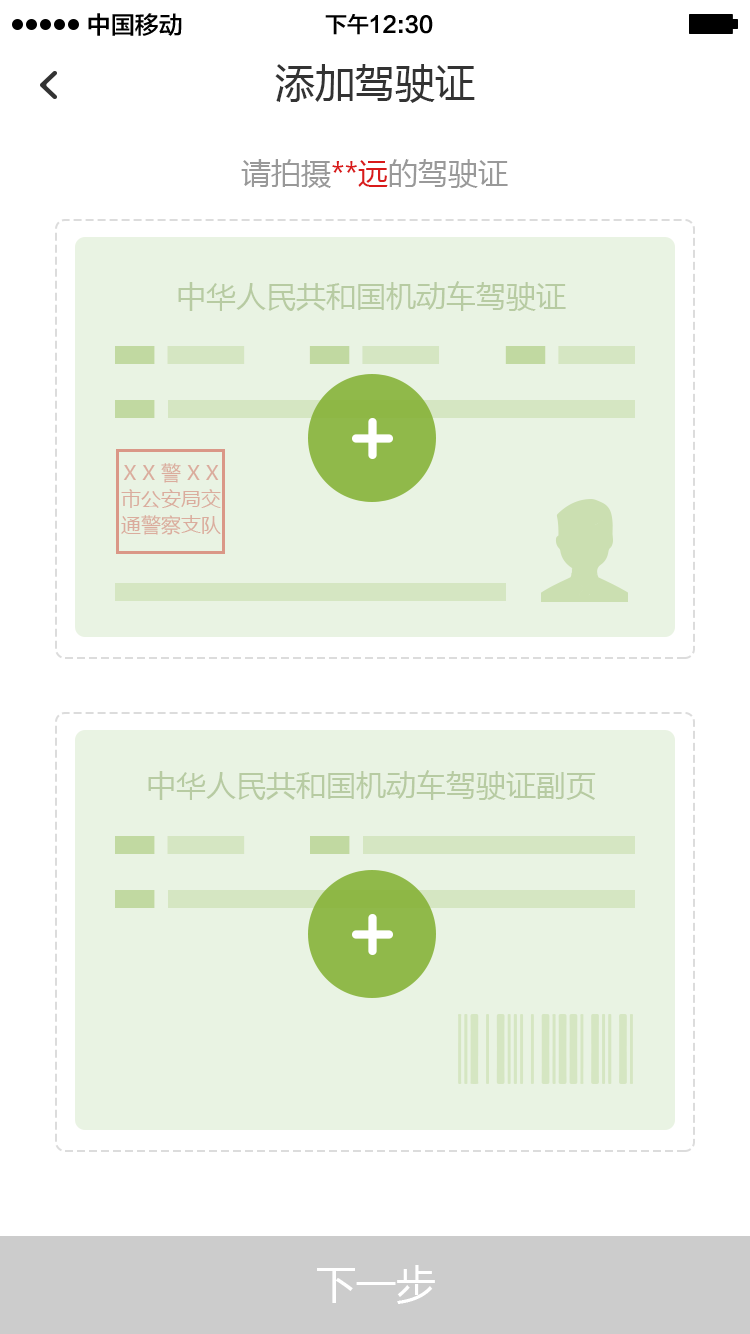
<style>
.page{position:relative;width:750px;height:1334px;background:#ffffff}
.page>*{position:absolute;margin:0}
.t1{font:24px "FZLTZHK--GBK1-0";color:#000000}
.t2{font:22px "FZLTZHK--GBK1-0";color:#000000}
.t3{font:40px "MicrosoftYaHei";color:#333333}
.t4{font:30px "MicrosoftYaHei";color:#999999}
.t5{font:30px "MicrosoftYaHei";color:#d91a1a}
.t6{font:30px "MicrosoftYaHei";color:#b7cba2}
.t7{font:20px/26px "MicrosoftYaHei";color:#daac9d}
.t8{font:40px "MicrosoftYaHei";color:#ffffff}
</style>
<div class="page">
<p class="t1" style="left:88px;top:13px;width:94px;height:23px">中国移动</p>
<p class="t2" style="left:325px;top:14px;width:108px;height:21px">下午12:30</p>
<p class="t3" style="left:275px;top:64px;width:200px;height:39px">添加驾驶证</p>
<p class="t4" style="left:241px;top:159px;width:267px;height:29px">请拍摄<span class="t5">**远</span>的驾驶证</p>
<p class="t6" style="left:178px;top:281px;width:388px;height:30px">中华人民共和国机动车驾驶证</p>
<p class="t7" style="left:121px;top:463px;width:100px;height:72px;text-align:center">X X 警 X X<br>市公安局交<br>通警察支队</p>
<p class="t6" style="left:148px;top:770px;width:448px;height:30px">中华人民共和国机动车驾驶证副页</p>
<p class="t8" style="left:317px;top:1265px;width:118px;height:39px">下一步</p>
</div>
